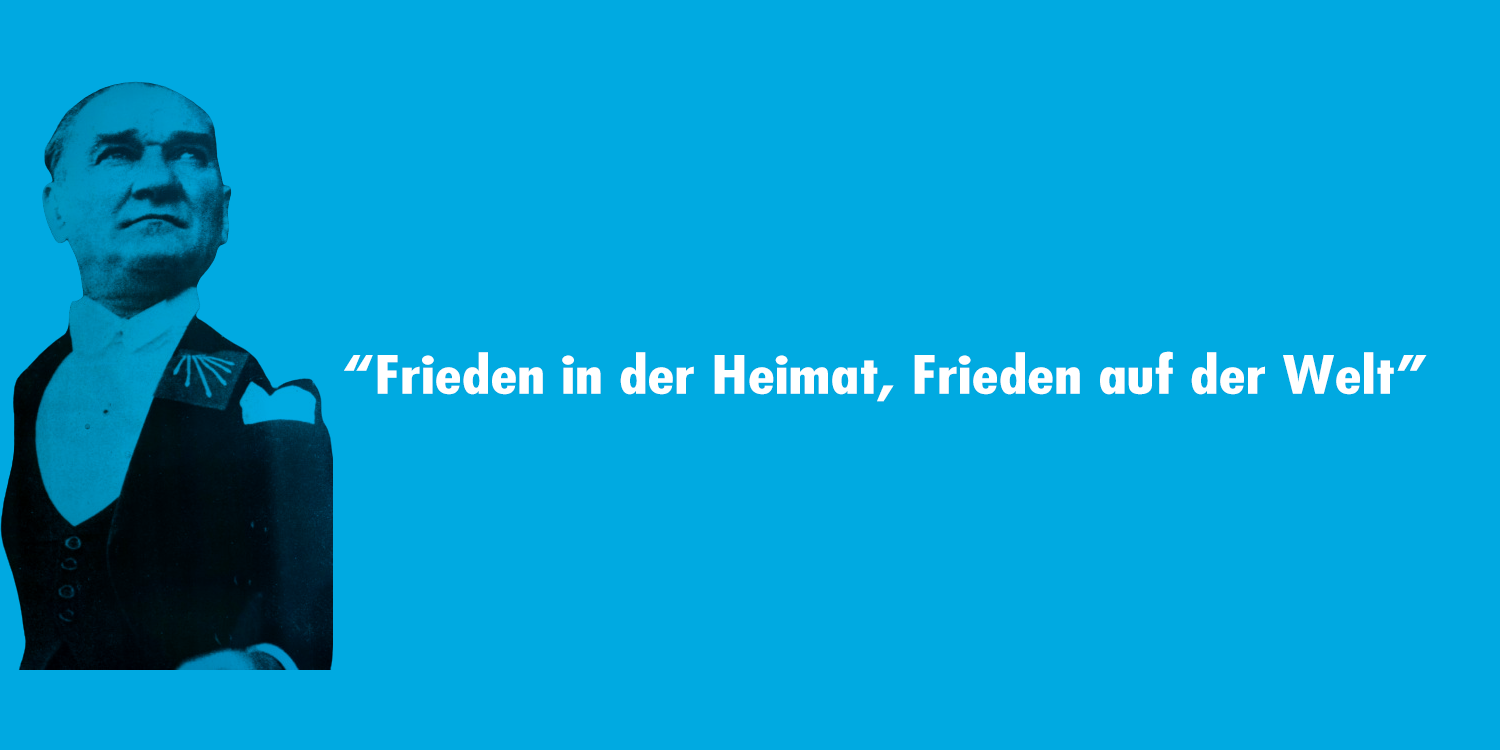
<style>
.page{position:relative;width:1500px;height:750px;background:#00aae1}
.page>*{position:absolute;margin:0}
.t1{font:51.5px "Futura-CondensedBold";color:#ffffff;scale:1.28 1}
</style>
<div class="page">
<p class="t1" style="left:344px;top:351px;width:1083px;height:51px">“Frieden in der Heimat, Frieden auf der Welt”</p>
</div>
